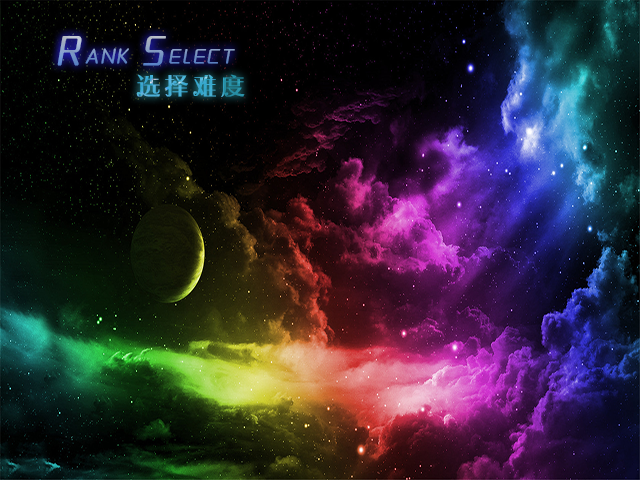
<style>
.page{position:relative;width:640px;height:480px}
.page>*{position:absolute;margin:0}
.t1{font:18px "MFYaYuan_Noncommercial-Regular";letter-spacing:0.15em;font-weight:bold;font-style:italic}
.t2{font:36px "MFYaYuan_Noncommercial-Regular";letter-spacing:0.15em;font-weight:bold;font-style:italic}
.t3{font:24px "MYoyoPRC-Medium";letter-spacing:0.15em;font-weight:bold}
</style>
<div class="page">
<p class="t1" style="left:57px;top:36px;width:178px;height:30px"><span class="t2">R</span>ANK <span class="t2">S</span>ELECT</p>
<p class="t3" style="left:136px;top:74px;width:109px;height:23px">选择难度</p>
</div>
